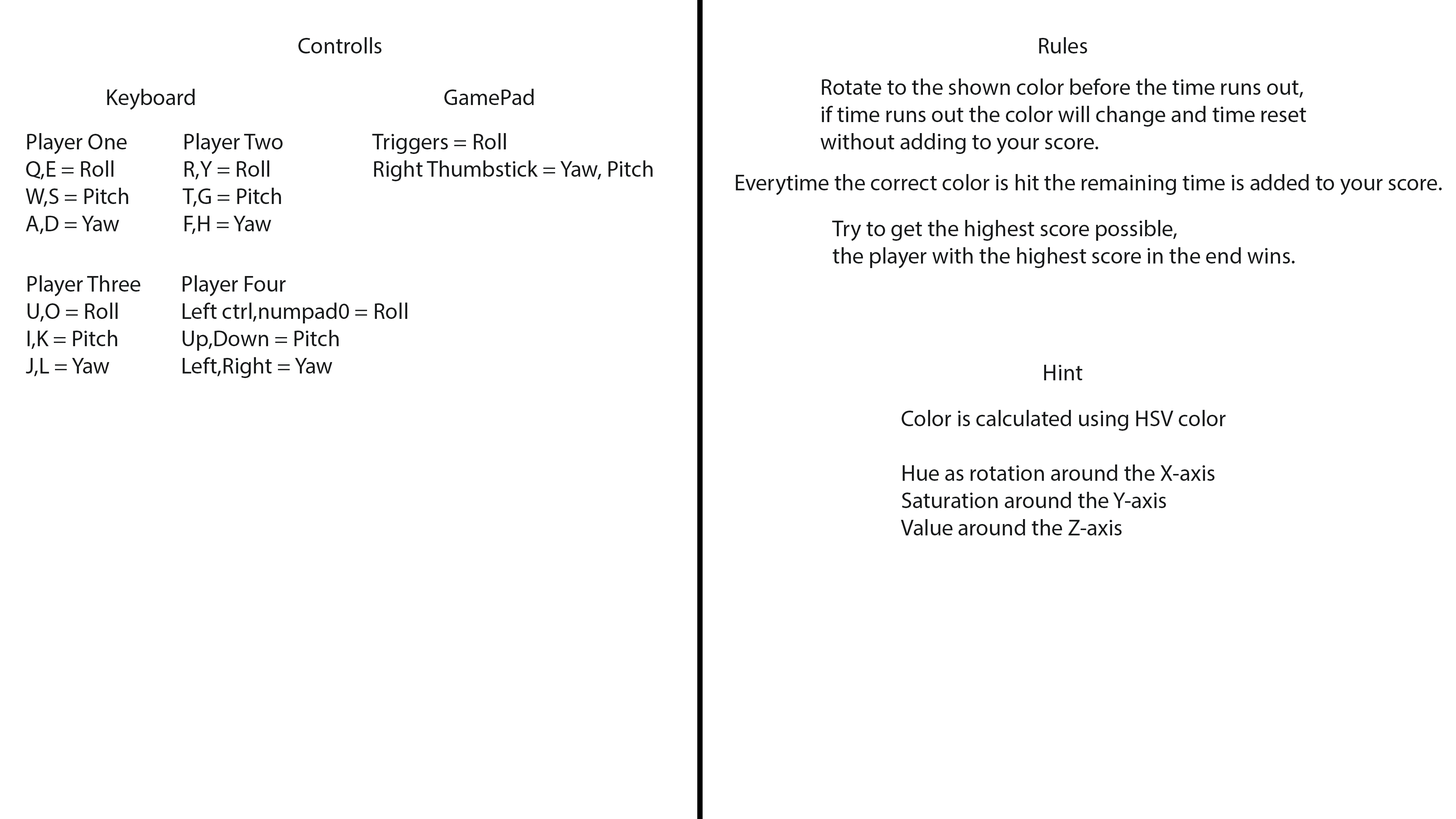
<style>
.page{position:relative;width:1456px;height:819px;background:#ffffff}
.page>*{position:absolute;margin:0}
.t1{font:22.7px "MyriadPro-Regular";color:#181a1b}
</style>
<div class="page">
<p class="t1" style="left:298px;top:37px;width:83px;height:16px">Controlls</p>
<p class="t1" style="left:1039px;top:37px;width:48px;height:16px">Rules</p>
<p class="t1" style="left:107px;top:89px;width:88px;height:21px">Keyboard</p>
<p class="t1" style="left:444px;top:89px;width:90px;height:16px">GamePad</p>
<p class="t1" style="left:821px;top:78px;width:485px;height:76px">Rotate to the shown color before the time runs out,<br>if time runs out the color will change and time reset<br>without adding to your score.</p>
<p class="t1" style="left:26px;top:133px;width:102px;height:101px">Player One<br>Q,E = Roll<br>W,S = Pitch<br>A,D = Yaw</p>
<p class="t1" style="left:182px;top:133px;width:101px;height:101px">Player Two<br>R,Y = Roll<br>T,G = Pitch<br>F,H = Yaw</p>
<p class="t1" style="left:372px;top:133px;width:281px;height:48px">Triggers = Roll<br>Right Thumbstick = Yaw, Pitch</p>
<p class="t1" style="left:736px;top:174px;width:706px;height:21px">Everytime the correct color is hit the remaining time is added to your score.</p>
<p class="t1" style="left:832px;top:220px;width:463px;height:48px">Try to get the highest score possible,<br>the player with the highest score in the end wins.</p>
<p class="t1" style="left:26px;top:275px;width:114px;height:102px">Player Three<br>U,O = Roll<br>I,K = Pitch<br>J,L = Yaw</p>
<p class="t1" style="left:182px;top:275px;width:225px;height:103px">Player Four<br>Left ctrl,numpad0 = Roll<br>Up,Down = Pitch<br>Left,Right = Yaw</p>
<p class="t1" style="left:1044px;top:365px;width:39px;height:15px">Hint</p>
<p class="t1" style="left:901px;top:410px;width:325px;height:125px">Color is calculated using HSV color<br><br>Hue as rotation around the X-axis<br>Saturation around the Y-axis<br>Value around the Z-axis</p>
</div>
